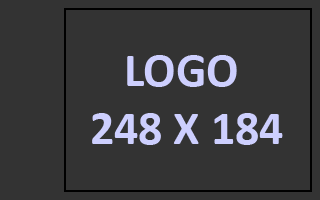
<style>
.page{position:relative;width:320px;height:200px;background:#333333}
.page>*{position:absolute;margin:0}
.t1{font:48px "Calibri-Bold";color:#cdcffe}
</style>
<div class="page">
<p class="t1" style="left:92px;top:55px;width:191px;height:90px;text-align:center">LOGO <br>248 X 184</p>
</div>
